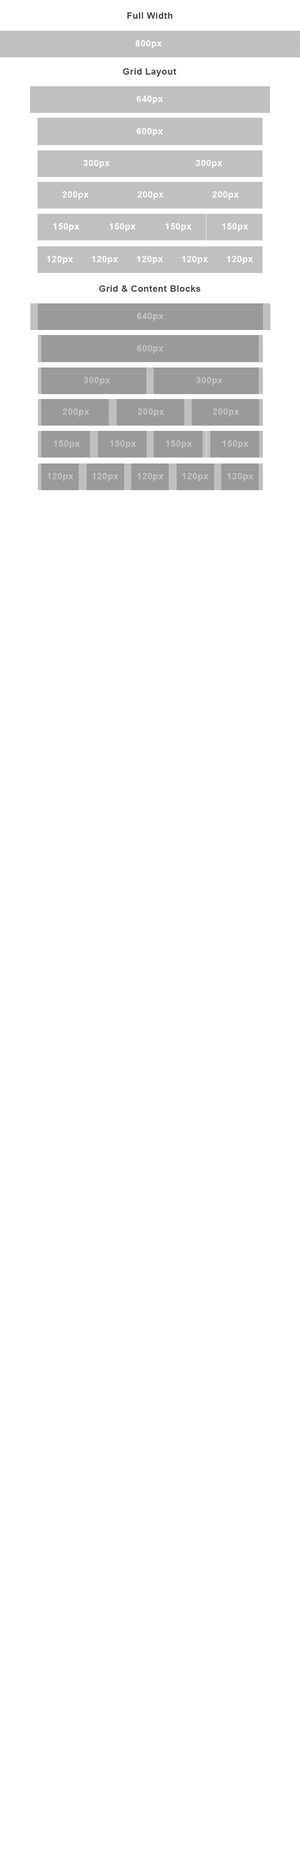
<style>
.page{position:relative;width:300px;height:1875px;background:#ffffff}
.page>*{position:absolute;margin:0}
.t1{font:9px "Arial-BoldMT";letter-spacing:0.033em;color:#494949}
.t2{font:9px "Arial-BoldMT";letter-spacing:0.033em;color:#ffffff}
.t3{font:9px "Arial-BoldMT";letter-spacing:0.033em;color:#c4c4c4}
</style>
<div class="page">
<p class="t1" style="left:127px;top:12px;width:45px;height:7px">Full Width</p>
<p class="t2" style="left:135px;top:40px;width:27px;height:8px">800px</p>
<p class="t1" style="left:123px;top:68px;width:53px;height:8px">Grid Layout</p>
<p class="t2" style="left:136px;top:96px;width:27px;height:8px">640px</p>
<p class="t2" style="left:136px;top:128px;width:27px;height:8px">600px</p>
<p class="t2" style="left:83px;top:160px;width:27px;height:8px">300px</p>
<p class="t2" style="left:196px;top:160px;width:26px;height:8px">300px</p>
<p class="t2" style="left:62px;top:191px;width:27px;height:9px">200px</p>
<p class="t2" style="left:137px;top:191px;width:27px;height:9px">200px</p>
<p class="t2" style="left:212px;top:191px;width:27px;height:9px">200px</p>
<p class="t2" style="left:53px;top:223px;width:27px;height:8px">150px</p>
<p class="t2" style="left:110px;top:223px;width:26px;height:8px">150px</p>
<p class="t2" style="left:165px;top:223px;width:27px;height:8px">150px</p>
<p class="t2" style="left:222px;top:223px;width:26px;height:8px">150px</p>
<p class="t2" style="left:47px;top:256px;width:26px;height:8px">120px</p>
<p class="t2" style="left:92px;top:256px;width:26px;height:8px">120px</p>
<p class="t2" style="left:137px;top:256px;width:26px;height:8px">120px</p>
<p class="t2" style="left:182px;top:256px;width:26px;height:8px">120px</p>
<p class="t2" style="left:227px;top:256px;width:26px;height:8px">120px</p>
<p class="t1" style="left:99px;top:285px;width:102px;height:7px">Grid &amp; Content Blocks</p>
<p class="t3" style="left:137px;top:313px;width:27px;height:8px">640px</p>
<p class="t3" style="left:137px;top:345px;width:27px;height:8px">600px</p>
<p class="t3" style="left:84px;top:377px;width:26px;height:8px">300px</p>
<p class="t3" style="left:196px;top:377px;width:27px;height:8px">300px</p>
<p class="t3" style="left:63px;top:408px;width:26px;height:9px">200px</p>
<p class="t3" style="left:138px;top:408px;width:26px;height:9px">200px</p>
<p class="t3" style="left:213px;top:408px;width:26px;height:9px">200px</p>
<p class="t3" style="left:54px;top:440px;width:26px;height:8px">150px</p>
<p class="t3" style="left:110px;top:440px;width:26px;height:8px">150px</p>
<p class="t3" style="left:166px;top:440px;width:26px;height:8px">150px</p>
<p class="t3" style="left:222px;top:440px;width:27px;height:8px">150px</p>
<p class="t3" style="left:47px;top:473px;width:27px;height:8px">120px</p>
<p class="t3" style="left:92px;top:473px;width:26px;height:8px">120px</p>
<p class="t3" style="left:137px;top:473px;width:27px;height:8px">120px</p>
<p class="t3" style="left:182px;top:473px;width:26px;height:8px">120px</p>
<p class="t3" style="left:227px;top:473px;width:27px;height:8px">120px</p>
</div>
